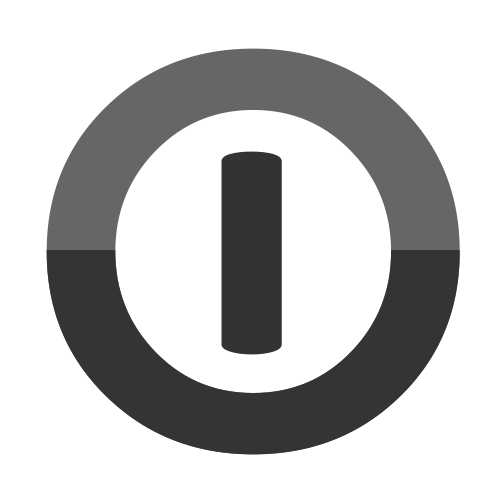
<style>
.page{position:relative;width:500px;height:500px;background:#ffffff}
.page>*{position:absolute;margin:0}
.t1{font:559.8px "Montserrat-Regular";font-weight:bold}
.t2{font:276.4px "Dosis-SemiBold";color:#333333;font-weight:bold;scale:2.03 1}
</style>
<div class="page">
<p class="t1" style="left:46px;top:48px;width:414px;height:407px">O</p>
<p class="t2" style="left:221px;top:151px;width:61px;height:204px">I</p>
</div>
